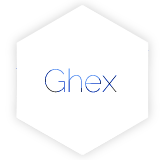
<style>
.page{position:relative;width:160px;height:160px;background:#ffffff}
.page>*{position:absolute;margin:0}
.t1{font:32px "Raleway-Thin";color:#000000}
</style>
<div class="page">
<p class="t1" style="left:45px;top:68px;width:72px;height:25px">Ghex</p>
</div>
